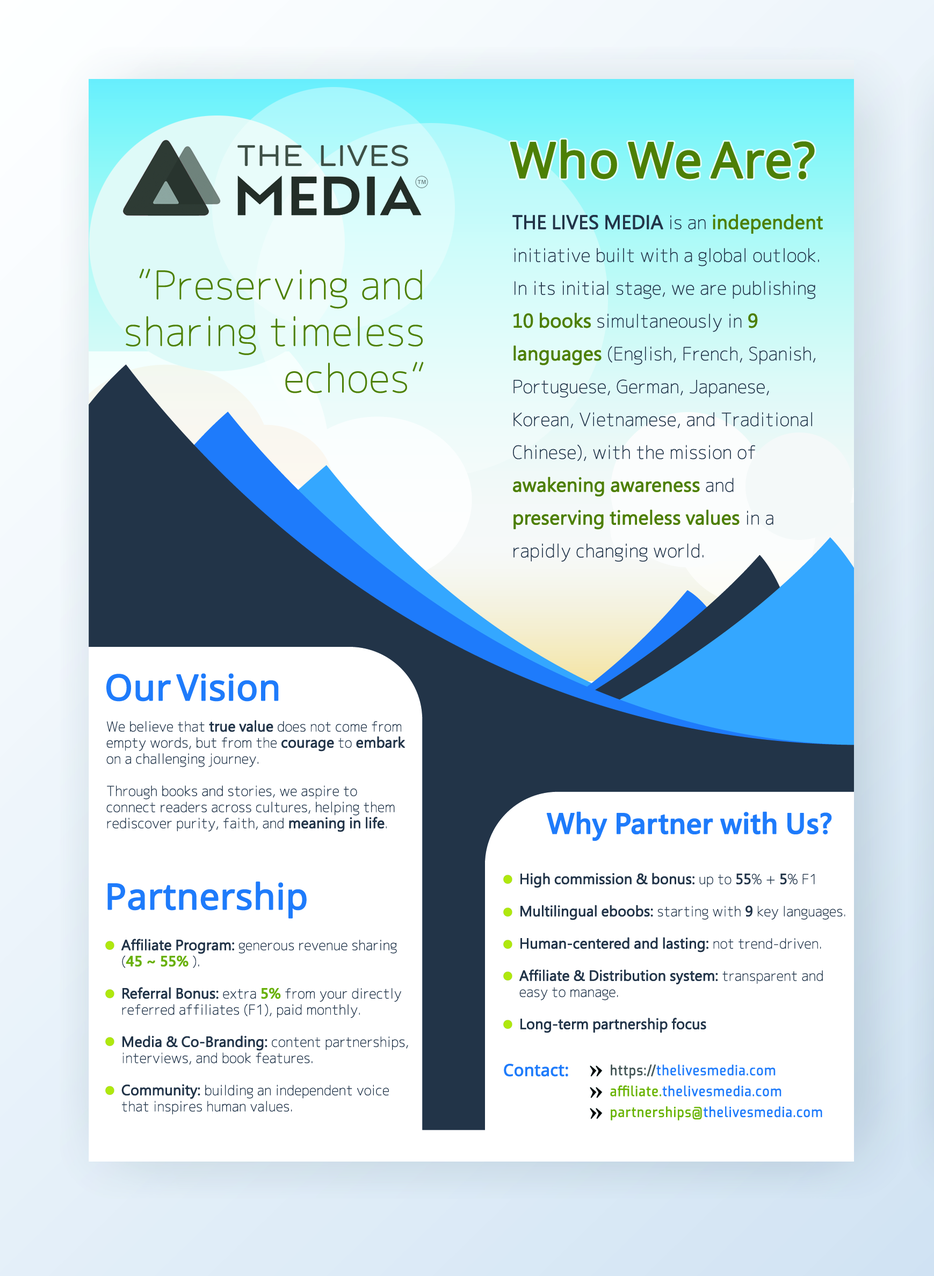
<style>
.page{position:relative;width:934px;height:1276px}
.page>*{position:absolute;margin:0}
.t1{font:49.3px "SansSerifCollection";color:#4d7f05;font-weight:bold}
.t2{font:17.9px/32.8px "Chogokuboso-Gothic";letter-spacing:-0.01em;color:#223448;font-weight:bold}
.t3{font:17.9px/32.8px "MicrosoftJhengHeiRegular";letter-spacing:-0.01em;color:#223448;font-weight:bold}
.t4{font:17.9px/32.8px "MicrosoftJhengHeiRegular";letter-spacing:-0.01em;color:#4d7e06;font-weight:bold}
.t5{font:38.8px "Chogokuboso-Gothic";color:#4d7f05;font-weight:bold}
.t6{font:35.8px "SansSerifCollection";letter-spacing:-0.01em;color:#1e7bfb;font-weight:bold}
.t7{font:13.4px "Chogokuboso-Gothic";letter-spacing:-0.01em;color:#223448;font-weight:bold}
.t8{font:13.4px "MicrosoftJhengHeiRegular";letter-spacing:-0.01em;color:#223448;font-weight:bold}
.t9{font:26.9px "MicrosoftJhengHeiBold";letter-spacing:-0.01em;color:#1e7bfb;font-weight:bold}
.t10{font:13.4px "MicrosoftJhengHeiBold";letter-spacing:-0.01em;color:#68b008;font-weight:bold}
.t11{font:16.4px "SansSerifCollection";letter-spacing:-0.01em;color:#1e7bfb;font-weight:bold}
.t12{font:13.4px/20.9px "Exo-Regular";letter-spacing:0.05em;color:#1e7bfb;font-weight:bold;scale:0.9 1}
.t13{font:13.4px/20.9px "Exo-Regular";letter-spacing:0.05em;color:#445556;font-weight:bold;scale:0.9 1}
.t14{font:13.4px/20.9px "Exo-Regular";letter-spacing:0.05em;color:#67b300;font-weight:bold;scale:0.9 1}
</style>
<div class="page">
<p class="t1" style="left:510px;top:139px;width:305px;height:40px">Who We Are?</p>
<p class="t2" style="left:513px;top:214px;width:310px;height:348px"><span class="t3">THE LIVES MEDIA</span> is an <span class="t4">independent </span>initiative built with a global outlook.<br>In its initial stage, we are publishing <span class="t4">10 books</span> simultaneously in <span class="t4">9 languages</span> (English, French, Spanish, Portuguese, German, Japanese, Korean, Vietnamese, and Traditional Chinese), with the mission of <span class="t4">awakening awareness</span> and <span class="t4">preserving timeless values</span> in a rapidly changing world.</p>
<p class="t5" style="left:126px;top:269px;width:298px;height:124px;text-align:right">“Preserving and sharing timeless echoes”</p>
<p class="t6" style="left:106px;top:673px;width:173px;height:29px">Our Vision</p>
<p class="t7" style="left:106px;top:720px;width:299px;height:112px">We believe that <span class="t8">true value</span> does not come from empty words, but from the <span class="t8">courage </span>to <span class="t8">embark </span>on a challenging journey.<br><br>Through books and stories, we aspire to connect readers across cultures, helping them rediscover purity, faith, and <span class="t8">meaning in life</span>.</p>
<p class="t9" style="left:546px;top:811px;width:286px;height:30px">Why Partner with Us?</p>
<p class="t6" style="left:107px;top:881px;width:200px;height:38px">Partnership</p>
<p class="t8" style="left:519px;top:873px;width:327px;height:160px">High commission &amp; bonus: <span class="t7">up to </span>55<span class="t7">% + </span>5<span class="t7">% F1<br><br></span>Multilingual eboobs: <span class="t7">starting with </span>9<span class="t7"> key languages.<br></span><br>Human-centered and lasting: <span class="t7">not trend-driven.<br><br></span>Affiliate &amp; Distribution system: <span class="t7">transparent and easy to manage.<br></span><br>Long-term partnership focus</p>
<p class="t7" style="left:121px;top:939px;width:287px;height:176px"><span class="t8">Affiliate Program:</span> generous revenue sharing (<span class="t10">45 ~ 55% </span>).<br><br><span class="t8">Referral Bonus: </span>extra <span class="t10">5%</span> from your directly referred affiliates (F1), paid monthly.<br><br><span class="t8">Media &amp; Co-Branding: </span>content partnerships, interviews, and book features.<br><br><span class="t8">Community:</span> building an independent voice that inspires human values.</p>
<p class="t11" style="left:504px;top:1064px;width:64px;height:13px">Contact:</p>
<p class="t12" style="left:610px;top:1064px;width:213px;height:57px"><span class="t13">https://</span>thelivesmedia.com<br><span class="t14">affiliate.</span>thelivesmedia.com<br><span class="t14">partnerships@</span>thelivesmedia.com</p>
</div>
